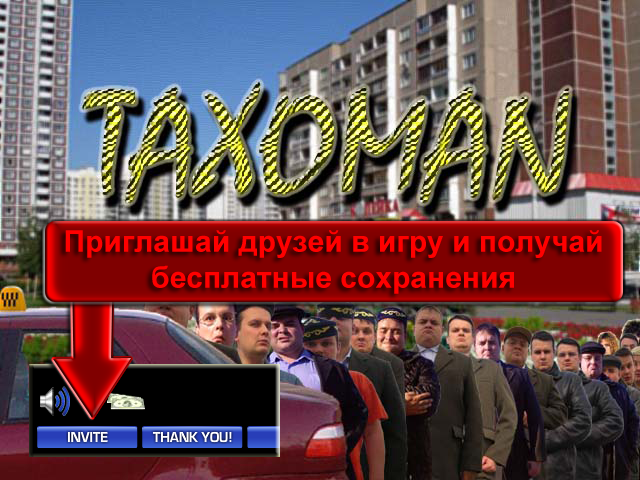
<style>
.page{position:relative;width:640px;height:480px}
.page>*{position:absolute;margin:0}
.t1{font:30px "Arial-BoldMT";color:#ff0000}
</style>
<div class="page">
<p class="t1" style="left:65px;top:230px;width:537px;height:64px;text-align:center">Приглашай друзей в игру и получай бесплатные сохранения</p>
</div>
